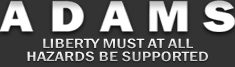
<style>
.page{position:relative;width:235px;height:67px;background:#333333}
.page>*{position:absolute;margin:0}
.t1{font:14px "FranklinGothic-MediumCond";scale:1.37 1}
.t2{font:14px "FranklinGothic-MediumCond";scale:1.38 1}
</style>
<div class="page">
<p class="t1" style="left:43px;top:38px;width:150px;height:11px">LIBERTY MUST AT ALL</p>
<p class="t2" style="left:27px;top:51px;width:181px;height:11px">HAZARDS BE SUPPORTED</p>
</div>
